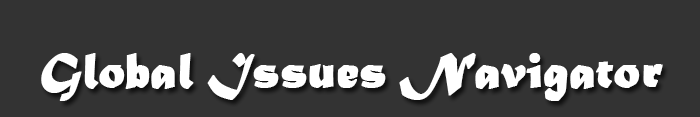
<style>
.page{position:relative;width:700px;height:117px;background:#333333}
.page>*{position:absolute;margin:0}
.t1{font:51.7px "MaturaMTScriptCapitals";color:#ffffff;font-weight:bold}
</style>
<div class="page">
<p class="t1" style="left:41px;top:53px;width:622px;height:48px">Global Issues Navigator</p>
</div>
